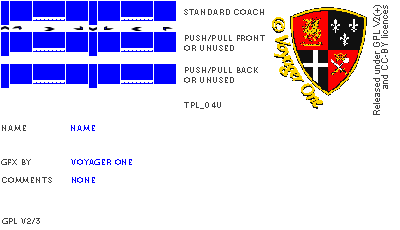
<style>
.page{position:relative;width:400px;height:230px;background:#ffffff}
.page>*{position:absolute;margin:0}
.t1{font:8px "Museo700-Regular";letter-spacing:0.075em;color:#404040;text-transform:uppercase}
.t2{font:8px "Museo700-Regular";letter-spacing:0.075em;color:#0000ff;text-transform:uppercase}
</style>
<div class="page">
<p class="t1" style="left:184px;top:9px;width:80px;height:6px">standard coach</p>
<p class="t1" style="left:184px;top:35px;width:81px;height:16px">push/pull front<br>or unused</p>
<p class="t1" style="left:184px;top:67px;width:74px;height:16px">push/pull back<br>or unused</p>
<p class="t1" style="left:184px;top:102px;width:37px;height:7px">tpl_04u</p>
<p class="t1" style="left:2px;top:125px;width:24px;height:6px">name</p>
<p class="t2" style="left:71px;top:125px;width:24px;height:6px">name</p>
<p class="t1" style="left:1px;top:159px;width:30px;height:6px">gfx by</p>
<p class="t2" style="left:71px;top:159px;width:61px;height:6px">voyager one</p>
<p class="t1" style="left:2px;top:177px;width:50px;height:6px">comments</p>
<p class="t2" style="left:72px;top:177px;width:23px;height:6px">none</p>
<p class="t1" style="left:2px;top:218px;width:38px;height:6px">gpl v2/3</p>
</div>
